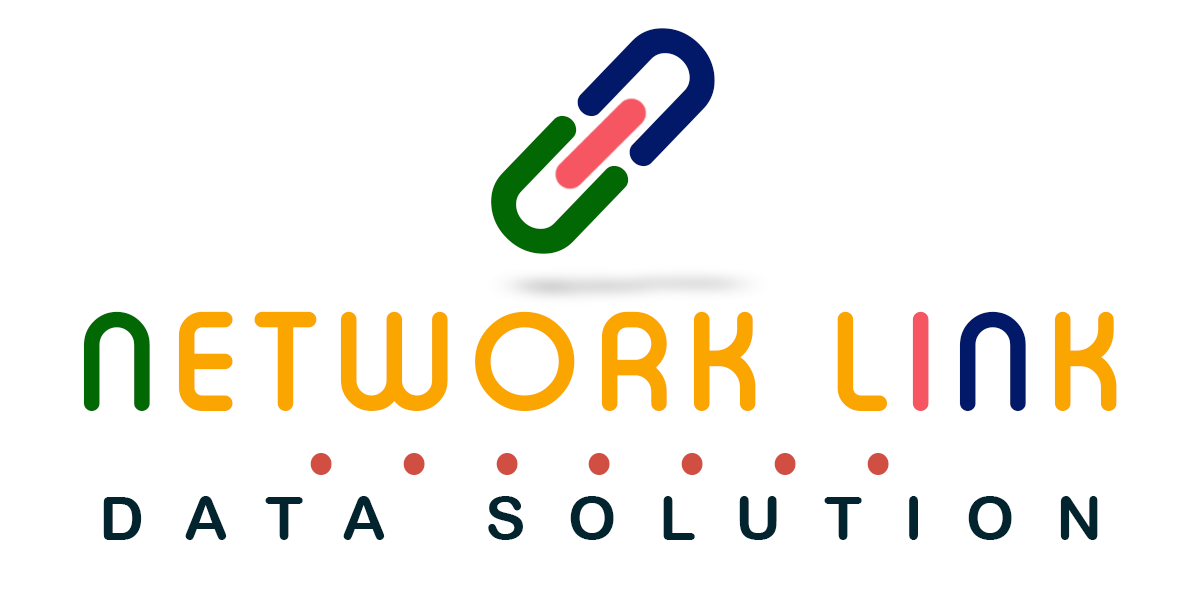
<style>
.page{position:relative;width:1200px;height:592px;background:#ffffff}
.page>*{position:absolute;margin:0}
.t1{font:165.7px "TypoRoundBoldDemo";letter-spacing:0.04em;color:#021868;text-transform:uppercase;font-weight:bold;scale:1.13 1}
.t2{font:165.7px "TypoRoundBoldDemo";letter-spacing:0.04em;color:#026804;text-transform:uppercase;font-weight:bold;scale:1.13 1}
.t3{font:130.1px "TypoRoundBoldDemo";letter-spacing:0.12em;color:#fba500}
.t4{font:130.1px "TypoRoundBoldDemo";letter-spacing:0.12em;color:#026804}
.t5{font:130.1px "TypoRoundBoldDemo";letter-spacing:0.12em;color:#f55662}
.t6{font:130.1px "TypoRoundBoldDemo";letter-spacing:0.12em;color:#021868}
.t7{font:117.9px "ElasticStretch";letter-spacing:0.6em;color:#d04f42;scale:0.94 1}
.t8{font:60.7px "ArialRoundedMTBold";letter-spacing:0.7em;color:#02242f;text-transform:uppercase}
</style>
<div class="page">
<p class="t1" style="left:577px;top:28px;width:138px;height:139px;rotate:44deg">n</p>
<p class="t2" style="left:491px;top:115px;width:138px;height:139px;rotate:-136deg">n</p>
<p class="t3" style="left:83px;top:311px;width:1034px;height:100px"><span class="t4">N</span>ETWORK L<span class="t5">I</span><span class="t6">N</span>K</p>
<p class="t7" style="left:310px;top:453px;width:579px;height:22px">.......</p>
<p class="t8" style="left:103px;top:496px;width:995px;height:44px">DATA SOLUTION</p>
</div>
